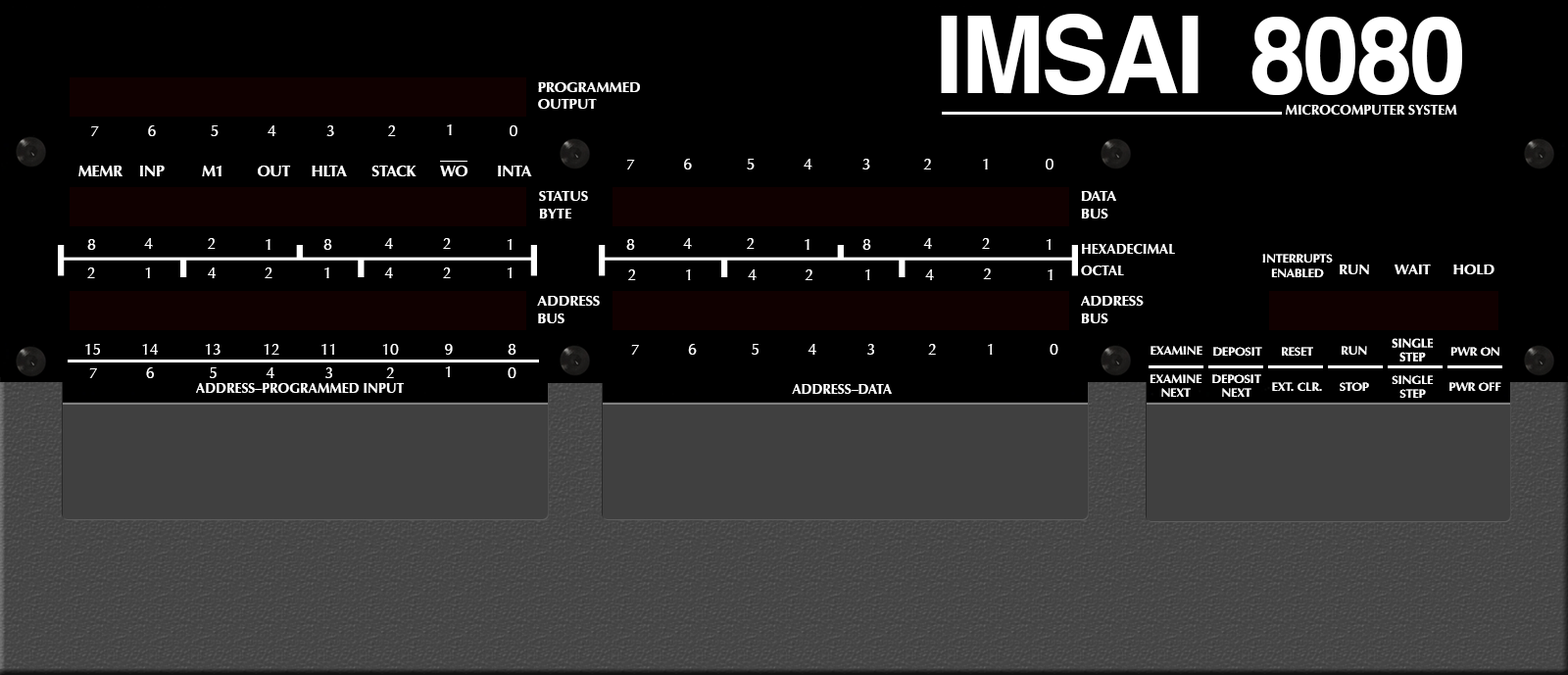
<style>
.page{position:relative;width:1568px;height:675px;background:#000000}
.page>*{position:absolute;margin:0}
.t1{font:107.2px "Helvetica-Bold";letter-spacing:-0.035em;color:#ffffff;scale:0.95 1}
.t2{font:14.5px "Optima-Bold";letter-spacing:-0.005em;color:#ffffff}
.t3{font:13.8px "Optima-Bold";letter-spacing:-0.005em;color:#ffffff}
.t4{font:15.3px "Optima-Regular";letter-spacing:-0.005em;color:#ffffff}
.t5{font:15.3px "Optima-Bold";letter-spacing:-0.005em;color:#ffffff}
.t6{font:13.8px/21.4px "Optima-Bold";letter-spacing:-0.005em;color:#ffffff}
.t7{font:12.2px/13.8px "Optima-Bold";letter-spacing:-0.005em;color:#ffffff}
.t8{font:12.2px "Optima-Bold";letter-spacing:-0.005em;color:#ffffff}
</style>
<div class="page">
<p class="t1" style="left:941px;top:14px;width:521px;height:81px">IMSAI  8080</p>
<p class="t2" style="left:538px;top:82px;width:102px;height:27px">PROGRAMMED<br>OUTPUT</p>
<p class="t3" style="left:1286px;top:105px;width:171px;height:10px">MICROCOMPUTER SYSTEM</p>
<p class="t4" style="left:148px;top:125px;width:8px;height:11px">6</p>
<p class="t4" style="left:211px;top:125px;width:8px;height:11px">5</p>
<p class="t4" style="left:268px;top:125px;width:8px;height:11px">4</p>
<p class="t4" style="left:326px;top:125px;width:8px;height:11px">3</p>
<p class="t4" style="left:388px;top:125px;width:8px;height:11px">2</p>
<p class="t4" style="left:447px;top:124px;width:5px;height:11px">1</p>
<p class="t4" style="left:510px;top:125px;width:7px;height:11px">0</p>
<p class="t4" style="left:91px;top:126px;width:8px;height:10px">7</p>
<p class="t4" style="left:627px;top:160px;width:8px;height:10px">7</p>
<p class="t4" style="left:684px;top:159px;width:8px;height:11px">6</p>
<p class="t4" style="left:747px;top:159px;width:8px;height:11px">5</p>
<p class="t4" style="left:804px;top:159px;width:8px;height:11px">4</p>
<p class="t4" style="left:862px;top:159px;width:8px;height:11px">3</p>
<p class="t4" style="left:923px;top:159px;width:8px;height:11px">2</p>
<p class="t4" style="left:983px;top:159px;width:5px;height:11px">1</p>
<p class="t4" style="left:1046px;top:159px;width:8px;height:11px">0</p>
<p class="t5" style="left:78px;top:166px;width:454px;height:10px">MEMR    INP         M1        OUT     HLTA      STACK      WO       INTA</p>
<p class="t2" style="left:539px;top:191px;width:49px;height:28px">STATUS<br>BYTE</p>
<p class="t2" style="left:1081px;top:191px;width:35px;height:28px">DATA<br>BUS</p>
<p class="t4" style="left:87px;top:239px;width:9px;height:11px">8</p>
<p class="t4" style="left:144px;top:238px;width:9px;height:11px">4</p>
<p class="t4" style="left:208px;top:238px;width:8px;height:11px">2</p>
<p class="t4" style="left:266px;top:239px;width:4px;height:11px">1</p>
<p class="t4" style="left:323px;top:239px;width:9px;height:11px">8</p>
<p class="t4" style="left:384px;top:238px;width:9px;height:11px">4</p>
<p class="t4" style="left:443px;top:238px;width:8px;height:11px">2</p>
<p class="t4" style="left:507px;top:239px;width:5px;height:11px">1</p>
<p class="t4" style="left:626px;top:239px;width:9px;height:11px">8</p>
<p class="t4" style="left:683px;top:238px;width:9px;height:11px">4</p>
<p class="t4" style="left:747px;top:238px;width:8px;height:11px">2</p>
<p class="t4" style="left:805px;top:239px;width:4px;height:11px">1</p>
<p class="t4" style="left:862px;top:239px;width:9px;height:11px">8</p>
<p class="t4" style="left:923px;top:238px;width:9px;height:11px">4</p>
<p class="t4" style="left:982px;top:238px;width:8px;height:11px">2</p>
<p class="t4" style="left:1046px;top:239px;width:5px;height:11px">1</p>
<p class="t6" style="left:1081px;top:244px;width:94px;height:31px">HEXADECIMAL<br>OCTAL</p>
<p class="t7" style="left:1262px;top:254px;width:71px;height:23px;text-align:center">INTERRUPTS<br>ENABLED</p>
<p class="t4" style="left:87px;top:268px;width:8px;height:10px">2</p>
<p class="t4" style="left:145px;top:268px;width:5px;height:10px">1</p>
<p class="t4" style="left:208px;top:268px;width:8px;height:10px">4</p>
<p class="t4" style="left:265px;top:268px;width:7px;height:10px">2</p>
<p class="t4" style="left:324px;top:268px;width:5px;height:10px">1</p>
<p class="t4" style="left:384px;top:268px;width:9px;height:10px">4</p>
<p class="t4" style="left:443px;top:268px;width:8px;height:10px">2</p>
<p class="t4" style="left:507px;top:268px;width:5px;height:10px">1</p>
<p class="t4" style="left:628px;top:270px;width:8px;height:10px">2</p>
<p class="t4" style="left:686px;top:270px;width:5px;height:10px">1</p>
<p class="t4" style="left:748px;top:270px;width:9px;height:10px">4</p>
<p class="t4" style="left:805px;top:270px;width:7px;height:10px">2</p>
<p class="t4" style="left:865px;top:270px;width:5px;height:10px">1</p>
<p class="t4" style="left:925px;top:270px;width:9px;height:10px">4</p>
<p class="t4" style="left:983px;top:269px;width:8px;height:10px">2</p>
<p class="t4" style="left:1048px;top:270px;width:5px;height:10px">1</p>
<p class="t2" style="left:1340px;top:265px;width:29px;height:9px">RUN</p>
<p class="t2" style="left:1395px;top:265px;width:36px;height:9px">WAIT</p>
<p class="t2" style="left:1453px;top:265px;width:41px;height:9px">HOLD</p>
<p class="t2" style="left:537px;top:296px;width:63px;height:27px">ADDRESS<br>BUS</p>
<p class="t2" style="left:1081px;top:296px;width:63px;height:27px">ADDRESS<br>BUS</p>
<p class="t7" style="left:1392px;top:338px;width:41px;height:24px;text-align:center">SINGLE<br>STEP</p>
<p class="t4" style="left:85px;top:344px;width:15px;height:11px">15</p>
<p class="t4" style="left:142px;top:344px;width:16px;height:11px">14</p>
<p class="t4" style="left:205px;top:344px;width:15px;height:11px">13</p>
<p class="t4" style="left:264px;top:344px;width:15px;height:11px">12</p>
<p class="t4" style="left:321px;top:344px;width:13px;height:11px">11</p>
<p class="t4" style="left:382px;top:344px;width:17px;height:11px">10</p>
<p class="t4" style="left:445px;top:344px;width:8px;height:11px">9</p>
<p class="t4" style="left:508px;top:344px;width:8px;height:11px">8</p>
<p class="t4" style="left:631px;top:345px;width:8px;height:10px">7</p>
<p class="t4" style="left:688px;top:344px;width:9px;height:11px">6</p>
<p class="t4" style="left:752px;top:344px;width:7px;height:11px">5</p>
<p class="t4" style="left:808px;top:344px;width:8px;height:11px">4</p>
<p class="t4" style="left:867px;top:344px;width:7px;height:11px">3</p>
<p class="t4" style="left:928px;top:344px;width:8px;height:11px">2</p>
<p class="t4" style="left:988px;top:344px;width:5px;height:11px">1</p>
<p class="t4" style="left:1050px;top:344px;width:8px;height:11px">0</p>
<p class="t8" style="left:1151px;top:346px;width:51px;height:9px">EXAMINE</p>
<p class="t8" style="left:1213px;top:347px;width:49px;height:9px">DEPOSIT</p>
<p class="t8" style="left:1282px;top:347px;width:31px;height:9px">RESET</p>
<p class="t8" style="left:1342px;top:346px;width:25px;height:9px">RUN</p>
<p class="t8" style="left:1450px;top:347px;width:49px;height:9px">PWR ON</p>
<p class="t4" style="left:89px;top:368px;width:8px;height:10px">7</p>
<p class="t4" style="left:146px;top:368px;width:8px;height:10px">6</p>
<p class="t4" style="left:210px;top:368px;width:7px;height:10px">5</p>
<p class="t4" style="left:266px;top:368px;width:8px;height:10px">4</p>
<p class="t4" style="left:325px;top:368px;width:7px;height:10px">3</p>
<p class="t4" style="left:386px;top:368px;width:8px;height:10px">2</p>
<p class="t4" style="left:445px;top:367px;width:5px;height:10px">1</p>
<p class="t4" style="left:508px;top:368px;width:8px;height:10px">0</p>
<p class="t7" style="left:1150px;top:374px;width:52px;height:23px;text-align:center">EXAMINE<br>NEXT</p>
<p class="t7" style="left:1212px;top:374px;width:49px;height:23px;text-align:center">DEPOSIT<br>NEXT</p>
<p class="t7" style="left:1392px;top:375px;width:42px;height:23px;text-align:center">SINGLE<br>STEP</p>
<p class="t3" style="left:196px;top:383px;width:208px;height:10px">ADDRESS–PROGRAMMED INPUT</p>
<p class="t3" style="left:792px;top:384px;width:100px;height:10px">ADDRESS–DATA</p>
<p class="t8" style="left:1272px;top:382px;width:50px;height:9px">EXT. CLR.</p>
<p class="t8" style="left:1340px;top:382px;width:29px;height:9px">STOP</p>
<p class="t8" style="left:1449px;top:382px;width:52px;height:9px">PWR OFF</p>
</div>
